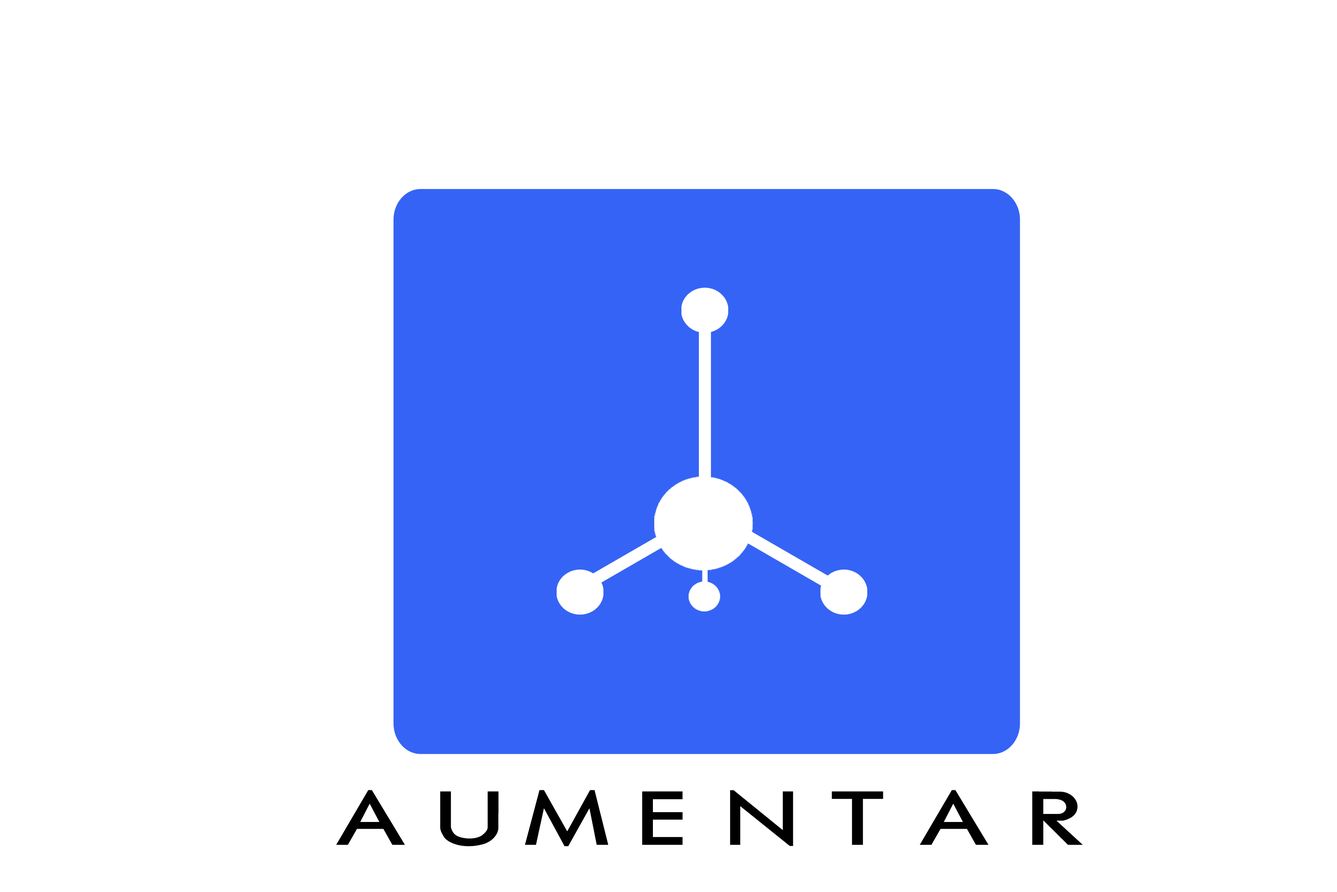
<style>
.page{position:relative;width:1337px;height:892px;background:#ffffff}
.page>*{position:absolute;margin:0}
.t1{font:69.1px "FuturistFixedWidth-Regular";color:#000000;font-weight:bold;scale:1.37 1}
</style>
<div class="page">
<p class="t1" style="left:336px;top:790px;width:747px;height:56px">AUMENTAR</p>
</div>
